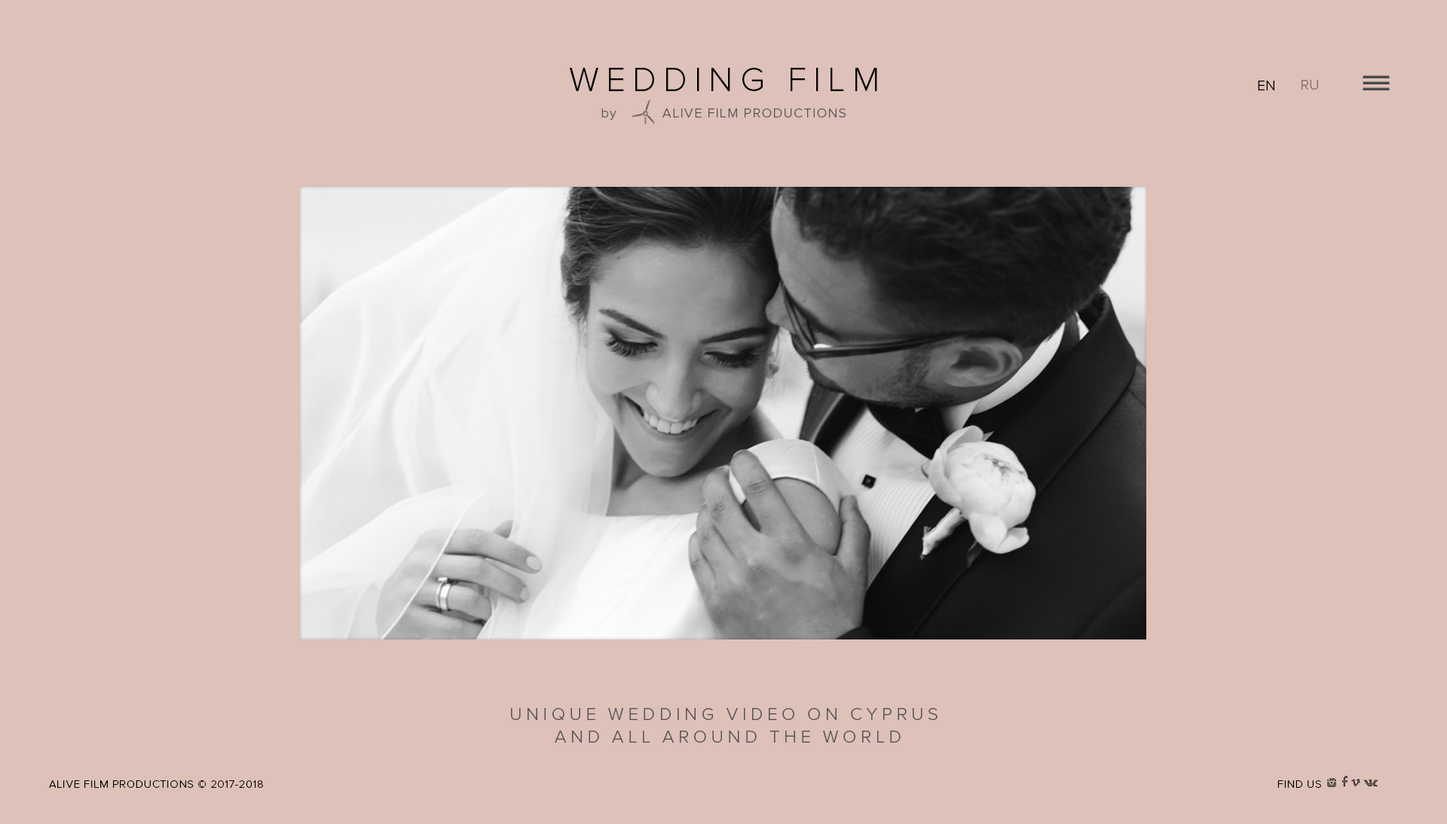
<style>
.page{position:relative;width:1447px;height:824px;background:#dec1b9}
.page>*{position:absolute;margin:0}
.t1{font:34.7px "ProximaNova-Light";letter-spacing:0.2em;color:#000000;text-transform:uppercase}
.t2{font:14.6px "ProximaNova-Light";color:#000000;text-transform:uppercase}
.t3{font:14.6px "ProximaNova-Light";color:#846f60;text-transform:uppercase}
.t4{font:13.6px "ProximaNova-Light";letter-spacing:0.075em;color:#575656}
.t5{font:18.1px/22.6px "ProximaNova-Light";letter-spacing:0.2em;color:#555555;text-transform:uppercase}
.t6{font:11.1px "ProximaNova-Light";letter-spacing:0.05em;color:#000000}
.t7{font:11.1px "Tahoma";letter-spacing:0.05em;color:#000000}
</style>
<div class="page">
<p class="t1" style="left:569px;top:68px;width:308px;height:23px">Wedding FILM</p>
<p class="t2" style="left:1258px;top:81px;width:16px;height:9px">en</p>
<p class="t3" style="left:1301px;top:80px;width:17px;height:10px">ru</p>
<p class="t4" style="left:601px;top:108px;width:244px;height:12px">by          ALIVE FILM PRODUCTIONS</p>
<p class="t5" style="left:511px;top:708px;width:426px;height:35px;text-align:center">Unique wedding video on Cyprus <br>and all around THE WORLD</p>
<p class="t6" style="left:49px;top:781px;width:214px;height:7px">ALIVE FILM PRODUCTIONS © 2017-2018</p>
<p class="t6" style="left:1277px;top:781px;width:44px;height:7px"><span class="t7">      </span>FIND US</p>
</div>
